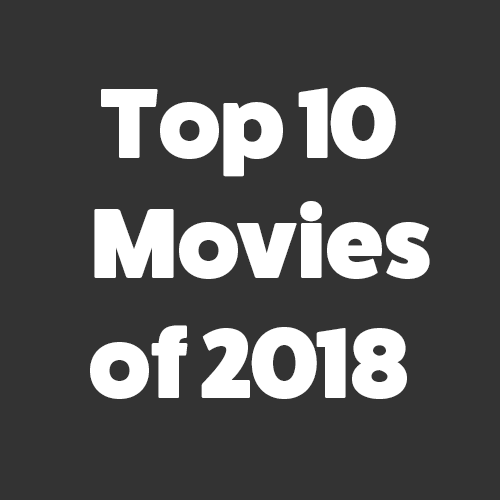
<style>
.page{position:relative;width:500px;height:500px;background:#333333}
.page>*{position:absolute;margin:0}
.t1{font:100px "FatFrank-Heavy";color:#ffffff}
</style>
<div class="page">
<p class="t1" style="left:90px;top:87px;width:340px;height:312px;text-align:center">Top 10<br>  Movies<br>of 2018</p>
</div>
